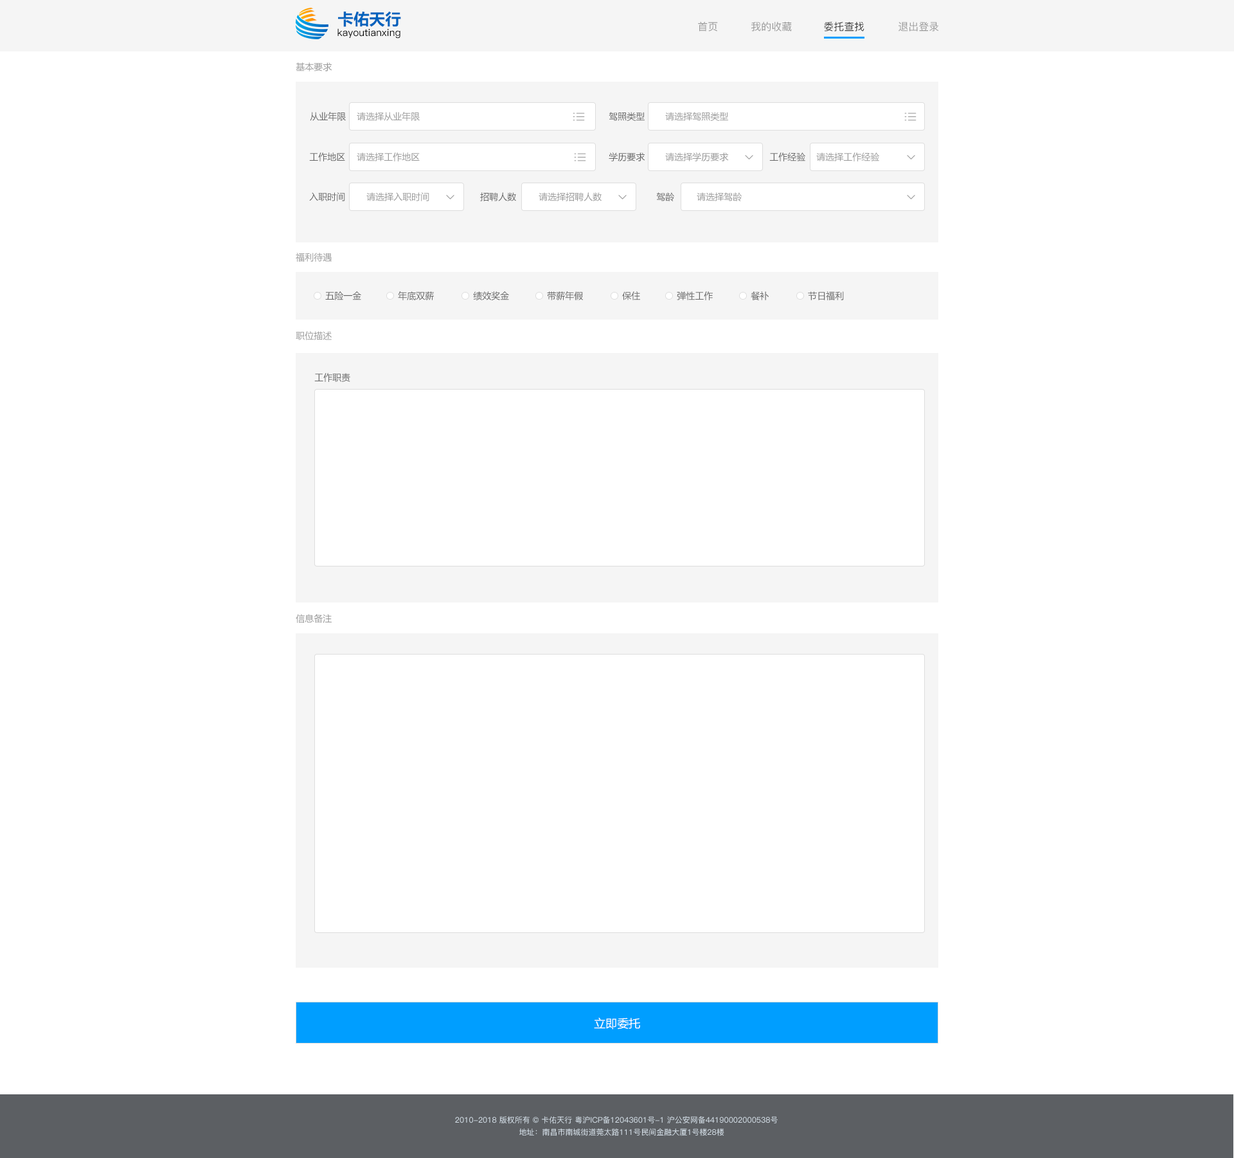
<style>
.page{position:relative;width:1234px;height:1158px;background:#ffffff}
.page>*{position:absolute;margin:0}
.t1{font:15.8px "MicrosoftYaHei-Bold";color:#0263bd}
.t2{font:10px "PingFang-SC-Medium";color:#000000}
.t3{font:10.3px "PingFang-SC-Medium";color:#999999}
.t4{font:10.3px "PingFang-SC-Medium";color:#333333}
.t5{font:9px "MicrosoftYaHei";color:#999999}
.t6{font:9px "MicrosoftYaHei";color:#666666}
.t7{font:11.6px "MicrosoftYaHei";color:#ffffff}
.t8{font:7.7px/12.2px "PingFang-SC-Medium";color:#d6e0e9}
</style>
<div class="page">
<p class="t1" style="left:338px;top:11px;width:63px;height:16px">卡佑天行</p>
<p class="t2" style="left:338px;top:28px;width:63px;height:11px">kayoutianxing</p>
<p class="t3" style="left:698px;top:22px;width:20px;height:10px">首页</p>
<p class="t3" style="left:752px;top:22px;width:40px;height:10px">我的收藏</p>
<p class="t4" style="left:824px;top:22px;width:41px;height:10px">委托查找</p>
<p class="t3" style="left:899px;top:22px;width:40px;height:10px">退出登录</p>
<p class="t5" style="left:296px;top:62px;width:36px;height:9px">基本要求</p>
<p class="t6" style="left:310px;top:112px;width:36px;height:9px">从业年限</p>
<p class="t5" style="left:357px;top:112px;width:63px;height:9px">请选择从业年限</p>
<p class="t6" style="left:609px;top:112px;width:36px;height:9px">驾照类型</p>
<p class="t5" style="left:665px;top:112px;width:63px;height:9px">请选择驾照类型</p>
<p class="t6" style="left:309px;top:152px;width:36px;height:9px">工作地区</p>
<p class="t5" style="left:357px;top:152px;width:63px;height:9px">请选择工作地区</p>
<p class="t6" style="left:609px;top:152px;width:36px;height:9px">学历要求</p>
<p class="t5" style="left:665px;top:152px;width:64px;height:9px">请选择学历要求</p>
<p class="t6" style="left:770px;top:152px;width:36px;height:9px">工作经验</p>
<p class="t5" style="left:816px;top:152px;width:63px;height:9px">请选择工作经验</p>
<p class="t6" style="left:309px;top:192px;width:36px;height:9px">入职时间</p>
<p class="t5" style="left:366px;top:192px;width:63px;height:9px">请选择入职时间</p>
<p class="t6" style="left:480px;top:192px;width:36px;height:9px">招聘人数</p>
<p class="t5" style="left:539px;top:192px;width:63px;height:9px">请选择招聘人数</p>
<p class="t6" style="left:656px;top:192px;width:18px;height:9px">驾龄</p>
<p class="t5" style="left:697px;top:192px;width:45px;height:9px">请选择驾龄</p>
<p class="t5" style="left:296px;top:253px;width:36px;height:9px">福利待遇</p>
<p class="t6" style="left:325px;top:291px;width:36px;height:9px">五险一金</p>
<p class="t6" style="left:398px;top:291px;width:36px;height:9px">年底双薪</p>
<p class="t6" style="left:473px;top:291px;width:36px;height:9px">绩效奖金</p>
<p class="t6" style="left:547px;top:291px;width:37px;height:9px">带薪年假</p>
<p class="t6" style="left:622px;top:291px;width:18px;height:9px">保住</p>
<p class="t6" style="left:677px;top:291px;width:36px;height:9px">弹性工作</p>
<p class="t6" style="left:751px;top:291px;width:18px;height:9px">餐补</p>
<p class="t6" style="left:808px;top:291px;width:36px;height:9px">节日福利</p>
<p class="t5" style="left:296px;top:331px;width:36px;height:9px">职位描述</p>
<p class="t6" style="left:314px;top:373px;width:36px;height:9px">工作职责</p>
<p class="t5" style="left:296px;top:614px;width:36px;height:9px">信息备注</p>
<p class="t7" style="left:594px;top:1017px;width:46px;height:12px">立即委托</p>
<p class="t8" style="left:455px;top:1116px;width:323px;height:20px;text-align:center">2010-2018 版权所有 © 卡佑天行 粤沪ICP备12043601号-1 沪公安网备44190002000538号    <br>地址：南昌市南城街道莞太路111号民间金融大厦1号楼28楼</p>
</div>
